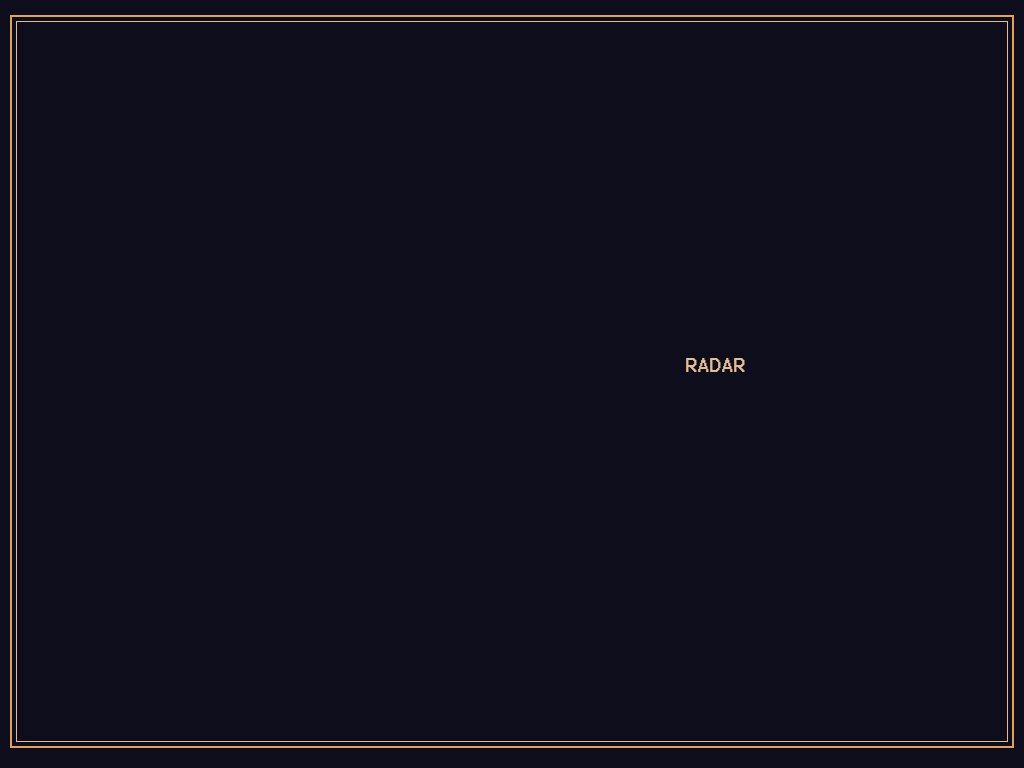
<style>
.page{position:relative;width:1024px;height:768px;background:#0d0d1b}
.page>*{position:absolute;margin:0}
.t1{font:16px "Terminal";color:#e3bd96}
</style>
<div class="page">
<p class="t1" style="left:686px;top:358px;width:59px;height:14px">RADAR</p>
</div>
